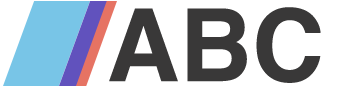
<style>
.page{position:relative;width:348px;height:87px;background:#ffffff}
.page>*{position:absolute;margin:0}
.t1{font:100.6px "Helvetica-Bold";color:#393838}
</style>
<div class="page">
<p class="t1" style="left:109px;top:7px;width:212px;height:76px">ABC</p>
</div>
